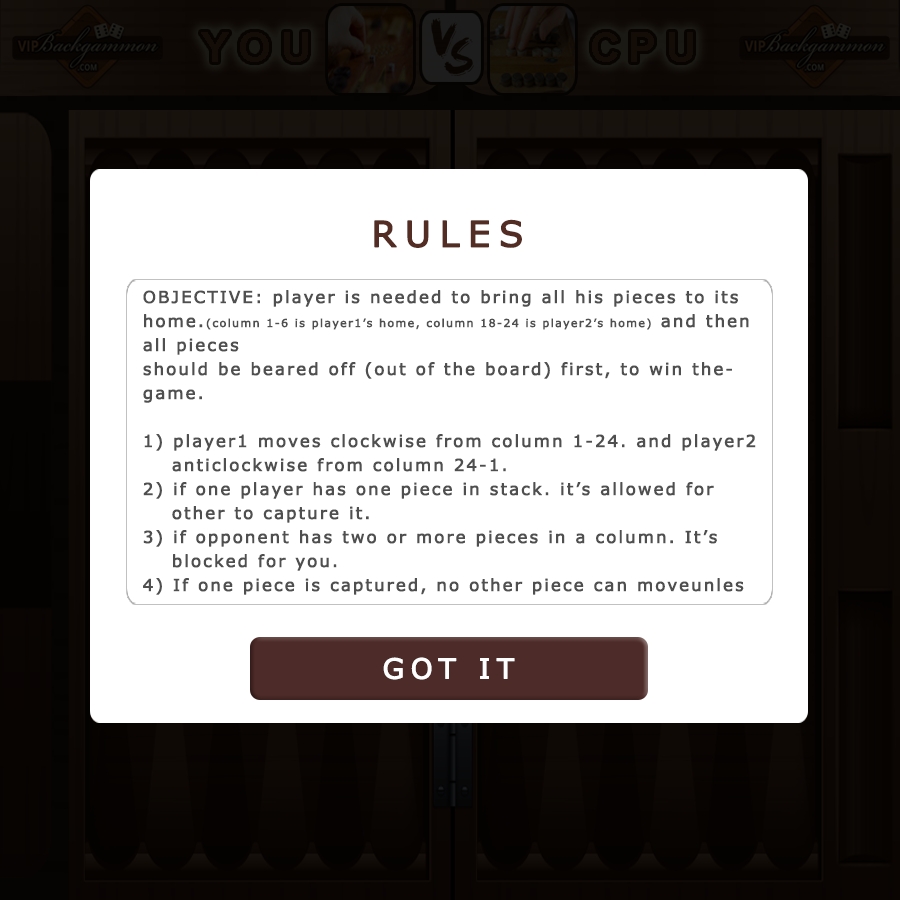
<style>
.page{position:relative;width:900px;height:900px;background:#ffffff}
.page>*{position:absolute;margin:0}
.t1{font:35.6px "Verdana";letter-spacing:0.215em;color:#532d23;font-weight:bold}
.t2{font:16.6px/24px "Verdana";letter-spacing:0.102em;color:#4f4f4f;font-weight:bold}
.t3{font:11px/24px "Verdana";letter-spacing:0.102em;color:#4f4f4f;font-weight:bold}
.t4{font:16.6px/24px "Verdana";letter-spacing:0.102em;color:#4f4f4f;font-style:italic}
.t5{font:16.6px/24px "Verdana";letter-spacing:0.102em;color:#4f4f4f}
.t6{font:27.6px "Verdana";letter-spacing:0.215em;color:#ffffff;font-weight:bold}
</style>
<div class="page">
<p class="t1" style="left:374px;top:219px;width:148px;height:29px">RULES</p>
<p class="t2" style="left:143px;top:290px;width:613px;height:305px">OBJECTIVE: player is needed to bring all his pieces to its home.<span class="t3">(column 1-6 is player1’s home, column 18-24 is player2’s home)</span> and then all pieces <br>should be beared off (out of the board) first, to win thegame.<br><br>1) player1 moves clockwise from column 1-24. and player2       <br>    anticlockwise from column 24-1.<br>2) if one player has one piece in stack. it’s allowed for     <br>    other to capture it. <br>3) if opponent has two or more pieces in a column. It’s <br>    blocked for you.<br>4) If one piece is captured, no other piece can moveunles <br>    captured one is independent. <br>    <span class="t4">See txt file for detailed documentation</span><span class="t5">.</span></p>
<p class="t6" style="left:383px;top:657px;width:132px;height:23px">GOT IT</p>
</div>
